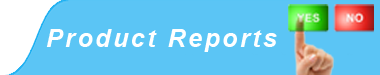
<style>
.page{position:relative;width:380px;height:75px;background:#5bc5f5}
.page>*{position:absolute;margin:0}
.t1{font:25px "Arial-BoldItalicMT";letter-spacing:0.1em;color:#ffffff}
</style>
<div class="page">
<p class="t1" style="left:46px;top:29px;width:231px;height:23px">Product Reports</p>
</div>
